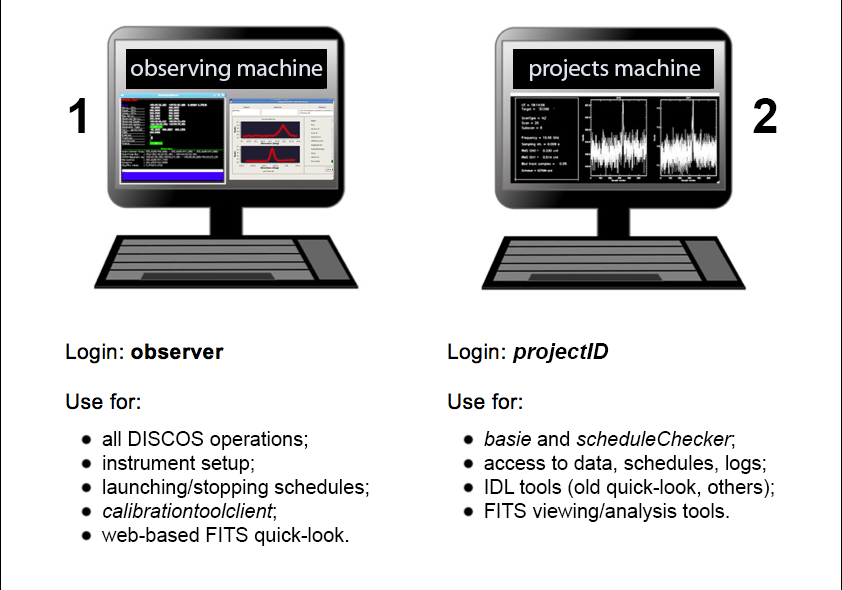
<style>
.page{position:relative;width:842px;height:590px;background:#ffffff}
.page>*{position:absolute;margin:0}
.t1{font:48px "Arial-BoldMT";color:#000000}
.t2{font:22px "Arial-BoldItalicMT";color:#000000}
.t3{font:20px "ArialMT";color:#000000}
.t4{font:20px "Arial-ItalicMT";color:#000000}
</style>
<div class="page">
<p class="t1" style="left:69px;top:98px;width:16px;height:35px">1</p>
<p class="t1" style="left:753px;top:98px;width:24px;height:35px">2</p>
<p class="t2" style="left:512px;top:343px;width:97px;height:20px">projectID</p>
<p class="t3" style="left:101px;top:431px;width:268px;height:115px">all DISCOS operations;<br>instrument setup;<br>launching/stopping schedules;<br><span class="t4">calibrationtoolclient</span>;<br>web-based FITS quick-look.</p>
<p class="t3" style="left:484px;top:431px;width:290px;height:91px"><span class="t4">basie</span> and <span class="t4">scheduleChecker</span>;<br>access to data, schedules, logs;<br>IDL tools (old quick-look, others);<br>FITS viewing/analysis tools.</p>
</div>
